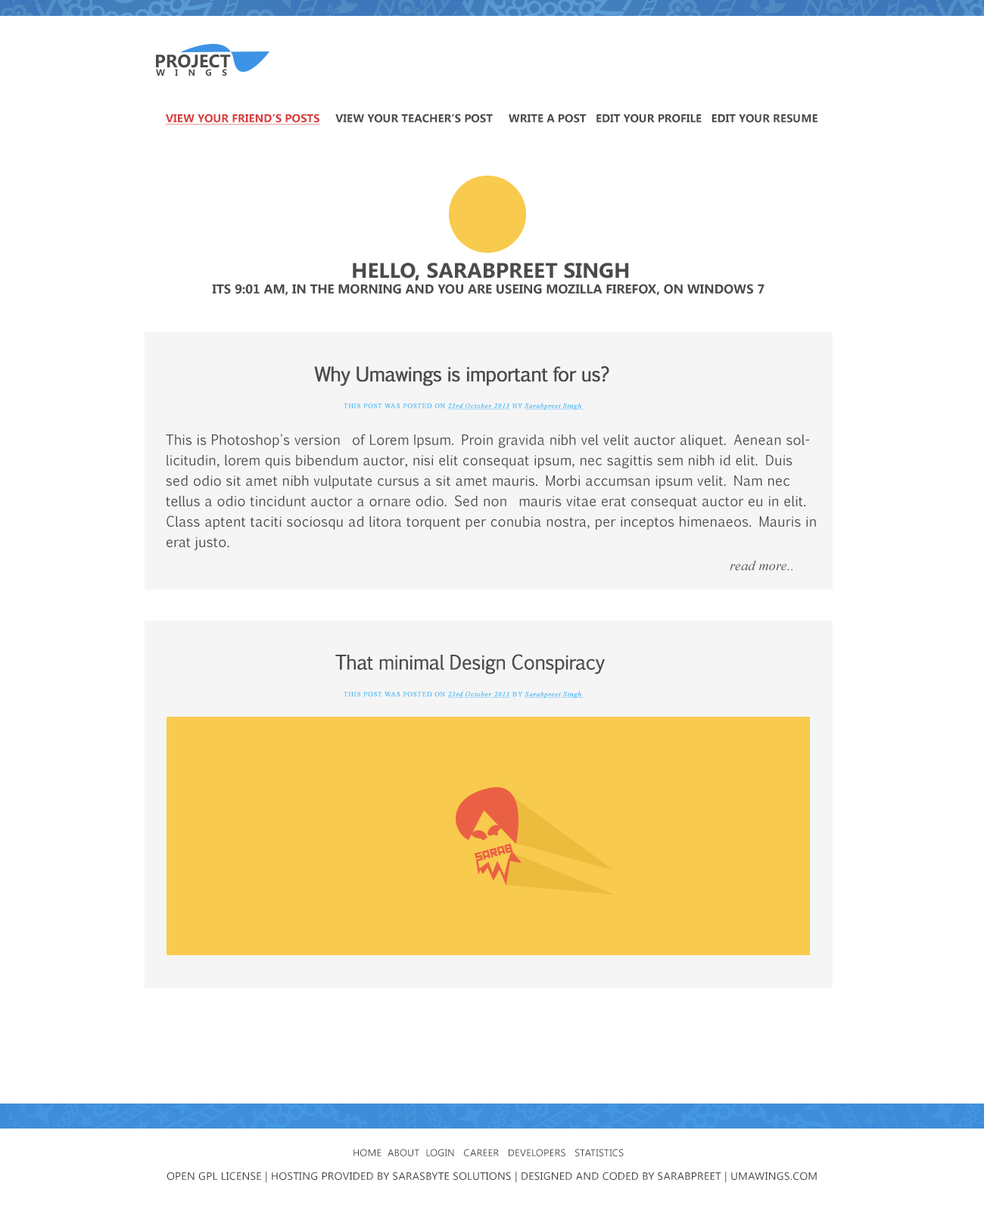
<style>
.page{position:relative;width:984px;height:1211px;background:#ffffff}
.page>*{position:absolute;margin:0}
.t1{font:18.2px/24.3px "SegoeUI-Bold";color:#4b4b4b;text-transform:uppercase}
.t2{font:9.1px/8.4px "SegoeUI-Bold";letter-spacing:1.12em;color:#4b4b4b;text-transform:uppercase}
.t3{font:11.4px "SegoeUI-Bold";color:#4b4b4b;text-transform:uppercase}
.t4{font:11.4px "SegoeUI-Bold";color:#d93b3b;text-transform:uppercase;text-decoration:underline}
.t5{font:21.2px "SegoeUI-Bold";color:#4b4b4b;text-transform:uppercase}
.t6{font:12.9px "SegoeUI-Bold";color:#4b4b4b;text-transform:uppercase}
.t7{font:18.9px "EuphemiaCAS";letter-spacing:-0.04em;color:#4b4b4b;font-weight:bold}
.t8{font:6.8px "TimesNewRomanPSMT";letter-spacing:0.06em;color:#4dbef8;text-transform:uppercase;font-weight:bold}
.t9{font:6.8px "TimesNewRomanPS-ItalicMT";letter-spacing:0.06em;color:#4dbef8;font-weight:bold;text-decoration:underline}
.t10{font:13.6px/20.4px "EuphemiaCAS";letter-spacing:0.016em;color:#4b4b4b}
.t11{font:13.6px/20.4px "EuphemiaCAS";color:#4b4b4b}
.t12{font:13.6px "TimesNewRomanPS-ItalicMT";letter-spacing:0.016em;color:#4b4b4b}
.t13{font:9.8px "SegoeUI";letter-spacing:0.02em;color:#403f3f;text-transform:uppercase}
.t14{font:10.6px "SegoeUI";letter-spacing:0.02em;color:#403f3f;text-transform:uppercase}
</style>
<div class="page">
<p class="t1" style="left:156px;top:55px;width:75px;height:21px">project<br><span class="t2">wings</span></p>
<p class="t3" style="left:166px;top:114px;width:652px;height:11px"><span class="t4">view your friend’s posts</span>     view your teacher’s post     write a post   edit your profile   edit your resume</p>
<p class="t5" style="left:353px;top:263px;width:276px;height:18px">hello, sarabpreet singh</p>
<p class="t6" style="left:212px;top:284px;width:553px;height:11px">its 9:01 am, in the morning and you are useing mozilla firefox, on windows 7</p>
<p class="t7" style="left:314px;top:366px;width:296px;height:20px">Why Umawings is important for us?</p>
<p class="t8" style="left:344px;top:403px;width:241px;height:7px">This post was posted on <span class="t9">23rd October 2013</span> by <span class="t9">Sarabpreet Singh</span></p>
<p class="t10" style="left:166px;top:434px;width:650px;height:116px">This is Photoshop's version  of Lorem Ipsum. Proin gravida nibh vel velit auctor aliquet. Aenean sollicitudin, lorem quis bibendum auctor, nisi elit consequat ipsum, nec sagittis sem nibh id elit. Duis sed odio sit amet nibh vulputate cursus a sit amet mauris. Morbi accumsan ipsum velit. Nam nec tellus a odio tincidunt auctor a ornare odio. Sed non  mauris vitae erat consequat auctor eu in elit. Class aptent taciti sociosqu ad litora torquent per conubia nostra, per inceptos himenaeos. Mauris in erat justo<span class="t11">.</span></p>
<p class="t12" style="left:730px;top:560px;width:63px;height:11px">read more..</p>
<p class="t7" style="left:335px;top:654px;width:270px;height:21px">That minimal Design Conspiracy</p>
<p class="t8" style="left:344px;top:691px;width:241px;height:8px">This post was posted on <span class="t9">23rd October 2013</span> by <span class="t9">Sarabpreet Singh</span></p>
<p class="t13" style="left:354px;top:1149px;width:270px;height:8px">home  about  login   career   developers   statistics</p>
<p class="t14" style="left:167px;top:1172px;width:650px;height:11px">open gpl license | hosting provided by sarasbyte solutions | designed and coded by sarabpreet | umawings.com</p>
</div>
